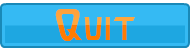
<style>
.page{position:relative;width:190px;height:49px;background:#35baf3}
.page>*{position:absolute;margin:0}
.t1{font:34px "Brassett"}
</style>
<div class="page">
<p class="t1" style="left:55px;top:9px;width:80px;height:32px">Quit</p>
</div>
